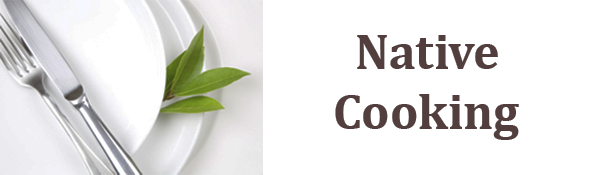
<style>
.page{position:relative;width:600px;height:175px;background:#ffffff}
.page>*{position:absolute;margin:0}
.t1{font:50px "Cambria-Bold";color:#6b5151}
</style>
<div class="page">
<p class="t1" style="left:335px;top:35px;width:184px;height:105px">Native <br>Cooking</p>
</div>
